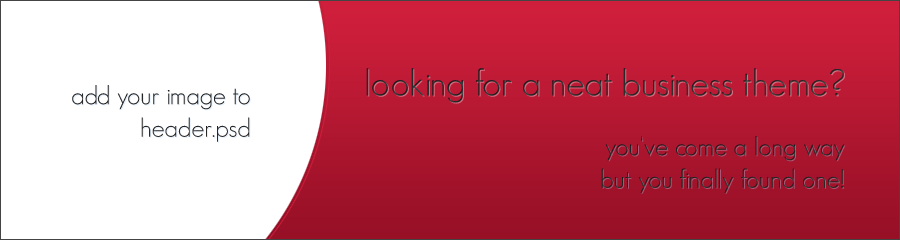
<style>
.page{position:relative;width:900px;height:240px;background:#ffffff}
.page>*{position:absolute;margin:0}
.t1{font:36.8px "GeosansLight";color:#2d2e2f}
.t2{font:26.1px/32.6px "GeosansLight";color:#272728}
.t3{font:26.1px/32.6px "GeosansLight";color:#262627}
</style>
<div class="page">
<p class="t1" style="left:366px;top:68px;width:478px;height:35px">looking for a neat business theme?</p>
<p class="t2" style="left:72px;top:85px;width:178px;height:57px;text-align:right">add your image to<br>header.psd</p>
<p class="t3" style="left:601px;top:136px;width:244px;height:57px;text-align:right">you‘ve come a long way<br>but you finally found one!</p>
</div>
